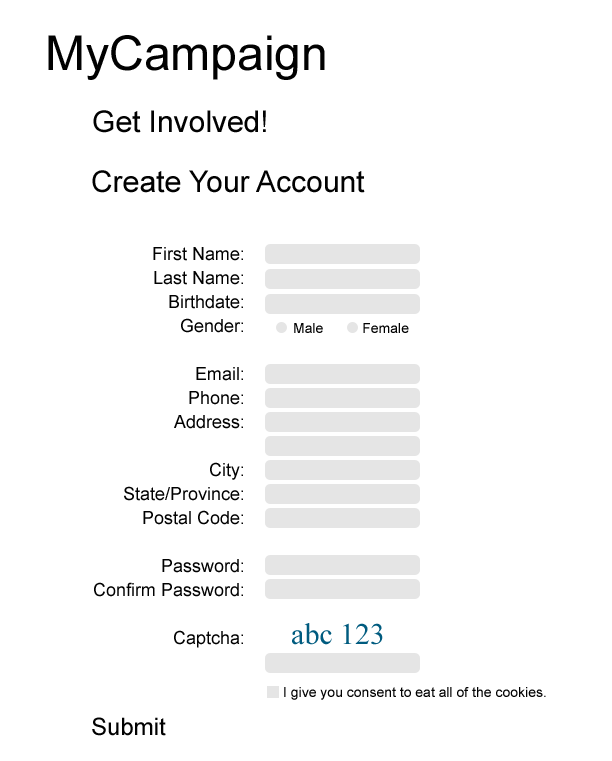
<style>
.page{position:relative;width:612px;height:761px;background:#ffffff}
.page>*{position:absolute;margin:0}
.t1{font:48px "ArialMT";color:#010101}
.t2{font:30px "ArialMT";color:#010101}
.t3{font:18px/24px "ArialMT";color:#010101}
.t4{font:14px "ArialMT";color:#010101}
.t5{font:30px "TimesNewRomanPSMT";color:#005b7f}
.t6{font:24px "ArialMT";color:#010101}
</style>
<div class="page">
<p class="t1" style="left:48px;top:35px;width:277px;height:45px">MyCampaign</p>
<p class="t2" style="left:93px;top:110px;width:173px;height:23px">Get Involved!</p>
<p class="t2" style="left:92px;top:170px;width:273px;height:23px">Create Your Account</p>
<p class="t3" style="left:94px;top:247px;width:149px;height:401px;text-align:right">First Name:<br>Last Name:<br>Birthdate:<br>Gender:<br><br>Email:<br>Phone:<br>Address:<br><br>City:<br>State/Province:<br>Postal Code:<br><br>Password:<br>Confirm Password:<br><br>Captcha:</p>
<p class="t4" style="left:294px;top:323px;width:115px;height:10px">Male          Female</p>
<p class="t5" style="left:292px;top:623px;width:91px;height:22px">abc 123</p>
<p class="t4" style="left:284px;top:687px;width:262px;height:13px">I give you consent to eat all of the cookies.</p>
<p class="t6" style="left:92px;top:717px;width:74px;height:19px">Submit</p>
</div>
